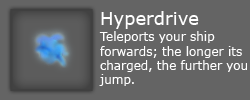
<style>
.page{position:relative;width:250px;height:100px;background:#646464}
.page>*{position:absolute;margin:0}
.t1{font:18px "Verdana";color:#ffffff}
.t2{font:12px "Verdana";color:#ffffff}
</style>
<div class="page">
<p class="t1" style="left:101px;top:11px;width:98px;height:18px">Hyperdrive</p>
<p class="t2" style="left:99px;top:31px;width:148px;height:55px">Teleports your ship forwards; the longer its charged, the further you jump.</p>
</div>
